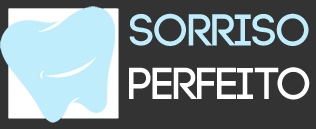
<style>
.page{position:relative;width:316px;height:129px;background:#333333}
.page>*{position:absolute;margin:0}
.t1{font:44.5px "Code-Bold";color:#ffffff}
.t2{font:44.5px "Code-Bold";color:#bfedfc}
</style>
<div class="page">
<p class="t1" style="left:129px;top:13px;width:181px;height:87px;text-align:center"><span class="t2">SORRISO<br></span>PERFEITO</p>
</div>
